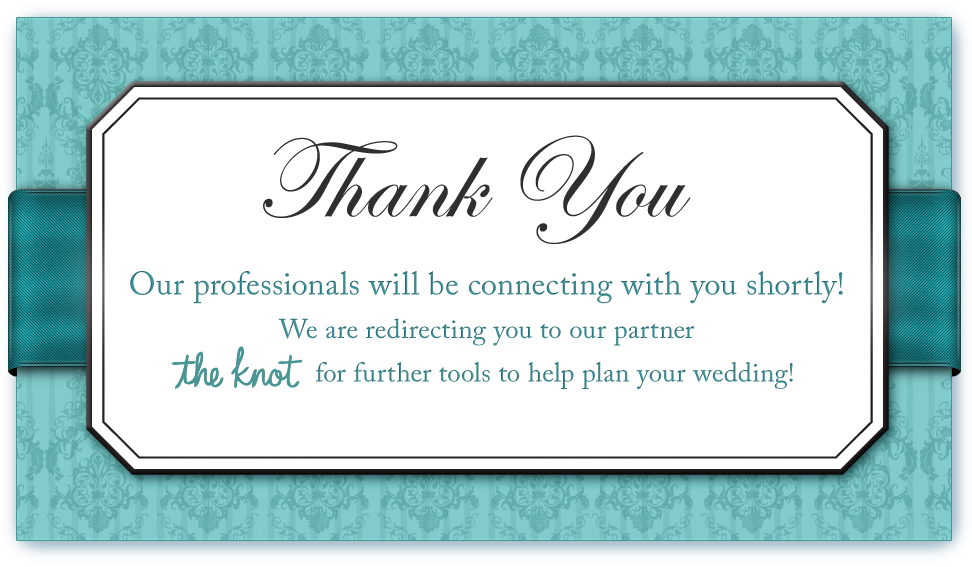
<style>
.page{position:relative;width:972px;height:567px;background:#ffffff}
.page>*{position:absolute;margin:0}
.t1{font:115.6px "EdwardianScriptITC";letter-spacing:-0.005em;color:#2f2f2f}
.t2{font:115.6px "EdwardianScriptITC";letter-spacing:0.015em;color:#2f2f2f}
.t3{font:115.6px "EdwardianScriptITC";letter-spacing:0.01em;color:#2f2f2f}
.t4{font:115.6px "EdwardianScriptITC";letter-spacing:0.012em;color:#2f2f2f}
.t5{font:115.6px "EdwardianScriptITC";color:#2f2f2f}
.t6{font:27.2px/43.5px "ACaslonPro-Regular";letter-spacing:0.01em;color:#3d939b}
.t7{font:32.6px/43.5px "ACaslonPro-Regular";letter-spacing:0.01em;color:#3d939b}
</style>
<div class="page">
<p class="t1" style="left:263px;top:135px;width:428px;height:109px"><span class="t2">T</span><span class="t3">h</span><span class="t4">a</span>nk<span class="t2"> Y</span><span class="t5">ou</span></p>
<p class="t6" style="left:130px;top:270px;width:713px;height:119px;text-align:center"><span class="t7">Our professionals will be connecting with you shortly!<br></span>We are redirecting you to our partner        <br>                   for further tools to help plan your wedding!</p>
</div>
